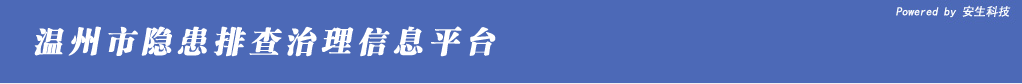
<style>
.page{position:relative;width:1022px;height:84px;background:#4c69b7}
.page>*{position:absolute;margin:0}
.t1{font:30px "FZCSJW--GB1-0";letter-spacing:0.2em;color:#ffffff;font-style:italic}
</style>
<div class="page">
<p class="t1" style="left:34px;top:26px;width:462px;height:31px">温州市隐患排查治理信息平台</p>
</div>
